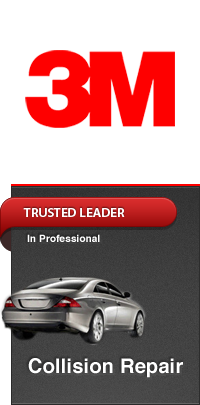
<style>
.page{position:relative;width:200px;height:405px;background:#ffffff}
.page>*{position:absolute;margin:0}
.t1{font:12px "MyriadPro-Semibold";color:#ffffff;text-transform:uppercase;scale:1.1 1}
.t2{font:10px "Helvetica-Bold";letter-spacing:0.01em;color:#ffffff}
.t3{font:20px "Helvetica-Bold";letter-spacing:0.01em;color:#ffffff}
</style>
<div class="page">
<p class="t1" style="left:23px;top:208px;width:102px;height:9px">TRUSTED LEADER</p>
<p class="t2" style="left:27px;top:234px;width:73px;height:8px">In Professional</p>
<p class="t3" style="left:28px;top:358px;width:155px;height:20px">Collision Repair</p>
</div>
